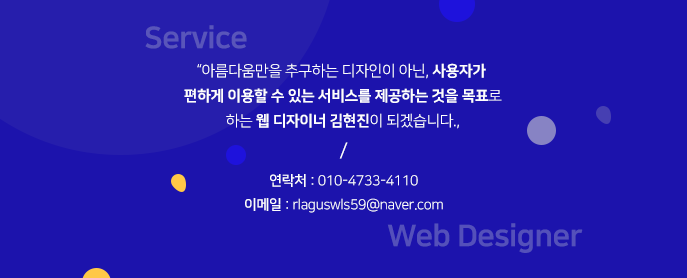
<style>
.page{position:relative;width:687px;height:278px;background:#1c13ac}
.page>*{position:absolute;margin:0}
.t1{font:30px "NanumSquareEB";letter-spacing:-0.02em;color:#5955ba}
.t2{font:15px/25px "NanumSquareEB";letter-spacing:-0.02em;color:#fefefe}
.t3{font:15px/25px "NanumSquareR";letter-spacing:-0.02em;color:#fefefe}
.t4{font:22px "MyriadPro-Regular";letter-spacing:-0.02em;color:#fefefe}
.t5{font:14px "NanumSquareR";letter-spacing:-0.02em;color:#fefefe}
.t6{font:14px "NanumSquareB";letter-spacing:-0.02em;color:#fefefe}
.t7{font:30px "NanumSquareEB";letter-spacing:-0.02em;color:#5450ba}
</style>
<div class="page">
<p class="t1" style="left:145px;top:25px;width:102px;height:24px">Service</p>
<p class="t2" style="left:184px;top:63px;width:318px;height:66px;text-align:center"><span class="t3">“아름다움만을 추구하는 디자인이 아닌, </span>사용자가 <br>편하게 이용할 수 있는 서비스를 제공하는 것을 목표<span class="t3">로<br>하는 </span>웹 디자이너 김현진<span class="t3">이 되겠습니다.,</span></p>
<p class="t4" style="left:339px;top:142px;width:9px;height:17px">/</p>
<p class="t5" style="left:270px;top:174px;width:148px;height:13px"><span class="t6">연락처 : </span>010-4733-4110</p>
<p class="t5" style="left:245px;top:198px;width:198px;height:15px"><span class="t6">이메일 : </span>rlaguswls59@naver.com</p>
<p class="t7" style="left:387px;top:223px;width:196px;height:30px">Web Designer</p>
</div>
